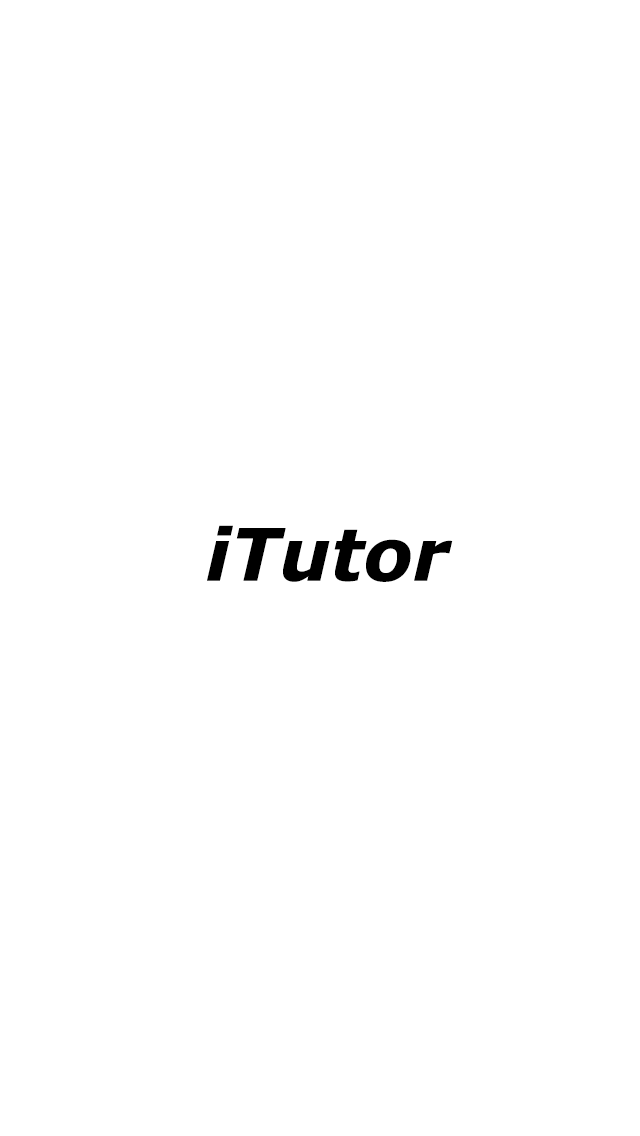
<style>
.page{position:relative;width:640px;height:1136px;background:#ffffff}
.page>*{position:absolute;margin:0}
.t1{font:72px "Verdana-BoldItalic";color:#000000}
</style>
<div class="page">
<p class="t1" style="left:207px;top:525px;width:246px;height:57px">iTutor</p>
</div>
